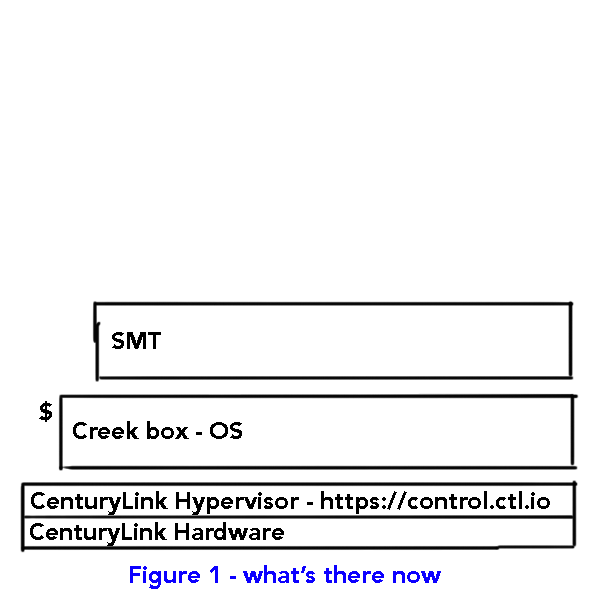
<style>
.page{position:relative;width:600px;height:600px;background:#ffffff}
.page>*{position:absolute;margin:0}
.t1{font:24px "Avenir-Black";color:#000000}
.t2{font:24px "Avenir-Black";color:#0c00ff}
</style>
<div class="page">
<p class="t1" style="left:112px;top:332px;width:49px;height:17px">SMT</p>
<p class="t1" style="left:39px;top:401px;width:13px;height:21px">$</p>
<p class="t1" style="left:73px;top:421px;width:169px;height:18px">Creek box - OS</p>
<p class="t1" style="left:31px;top:491px;width:519px;height:24px">CenturyLink Hypervisor - https://control.ctl.io</p>
<p class="t1" style="left:30px;top:522px;width:254px;height:24px">CenturyLink Hardware</p>
<p class="t2" style="left:130px;top:565px;width:311px;height:24px">Figure 1 - what’s there now</p>
</div>
